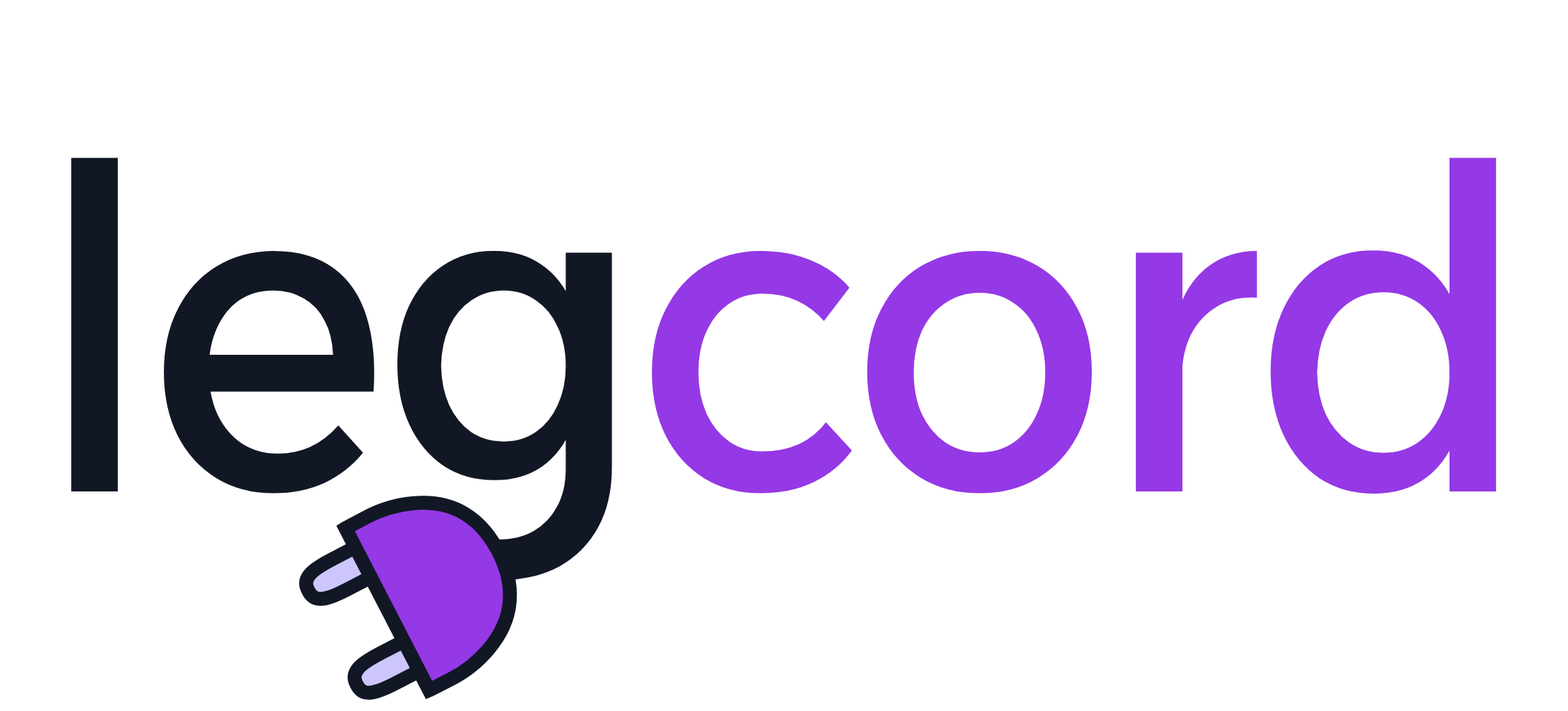
<style>
.page{position:relative;width:1568px;height:711px;background:#ffffff}
.page>*{position:absolute;margin:0}
.t1{font:449.7px "Alexandria-Regular";letter-spacing:-0.01em;color:#9538e6;scale:0.9 1}
.t2{font:449.7px "Alexandria-Regular";letter-spacing:-0.01em;color:#111725;scale:0.9 1}
</style>
<div class="page">
<p class="t1" style="left:71px;top:158px;width:1425px;height:423px"><span class="t2">leg</span>cord</p>
</div>
